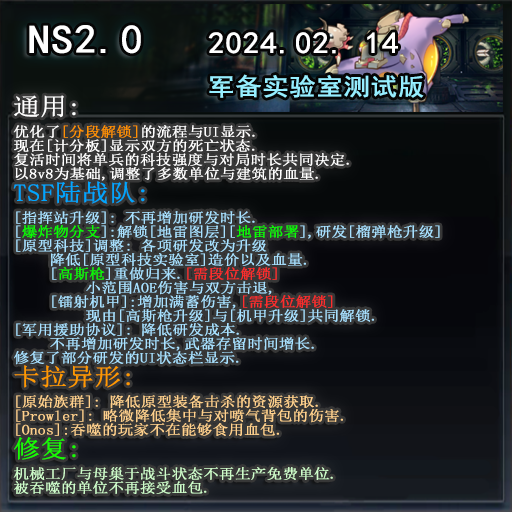
<style>
.page{position:relative;width:512px;height:512px}
.page>*{position:absolute;margin:0}
.t1{font:30px/50px "SimHei";color:#ffffff;font-weight:bold;scale:1.1 1}
.t2{font:40px/50px "SimHei";color:#ffffff;font-weight:bold;scale:1.1 1}
.t3{font:24px/50px "SimHei";color:#96eeff;font-weight:bold;scale:1.1 1}
.t4{font:14px/14px "SimSun";color:#a8e1ff;font-weight:bold;scale:1.1 1}
.t5{font:24px/30px "SimSun";color:#ffffff;font-weight:bold;scale:1.1 1}
.t6{font:14px/14px "SimSun";color:#ffffff;font-weight:bold;scale:1.1 1}
.t7{font:14px/14px "SimSun";color:#ff9100;font-weight:bold;scale:1.1 1}
.t8{font:24px/30px "SimSun";color:#00a6ff;font-weight:bold;scale:1.1 1}
.t9{font:14px/14px "SimSun";color:#04ff00;font-weight:bold;scale:1.1 1}
.t10{font:14px/14px "SimSun";color:#ff2c2c;font-weight:bold;scale:1.1 1}
.t11{font:24px/30px "SimSun";color:#ff9900;font-weight:bold;scale:1.1 1}
.t12{font:14px/14px "SimSun";color:#ffd18d;font-weight:bold;scale:1.1 1}
.t13{font:24px/30px "SimSun";color:#15ff00;font-weight:bold;scale:1.1 1}
.t14{font:14px/14px "SimSun";color:#cefcca;font-weight:bold;scale:1.1 1}
</style>
<div class="page">
<p class="t1" style="left:29px;top:25px;width:395px;height:73px"><span class="t2">NS2.0   </span>2024.02. 14<br>     <span class="t3">军备实验室测试版</span></p>
<p class="t4" style="left:13px;top:95px;width:427px;height:399px"><span class="t5">通用:<br></span><span class="t6">优化了</span><span class="t7">[分段解锁]</span><span class="t6">的流程与UI显示.<br>现在[计分板]显示双方的死亡状态.<br>复活时间将单兵的科技强度与对局时长共同决定.<br>以8v8为基础,调整了多数单位与建筑的血量.<br></span><span class="t8">TSF陆战队:<br></span>[指挥站升级]: 不再增加研发时长.<br>[<span class="t9">爆炸物分支</span>]:解锁[地雷图层][<span class="t9">地雷部署</span>],研发[榴弹枪升级]<br>[原型科技]调整: 各项研发改为升级<br> 降低[原型科技实验室]造价以及血量.<br> [<span class="t9">高斯枪</span>]重做归来.<span class="t10">[需段位解锁]<br></span>  小范围AOE伤害与双方击退,<br> [镭射机甲]:增加满蓄伤害,<span class="t10">[需段位解锁]<br></span>  现由[高斯枪升级]与[机甲升级]共同解锁.<br>[军用援助协议]: 降低研发成本.<br> 不再增加研发时长,武器存留时间增长.<br>修复了部分研发的UI状态栏显示.<br><span class="t11">卡拉异形:<br></span><span class="t12">[原始族群]: 降低原型装备击杀的资源获取.<br>[Prowler]: 略微降低集中与对喷气背包的伤害.<br>[Onos]:吞噬的玩家不在能够食用血包.<br></span><span class="t13">修复:<br></span><span class="t14">机械工厂与母巢于战斗状态不再生产免费单位.<br>被吞噬的单位不再接受血包.</span></p>
</div>
